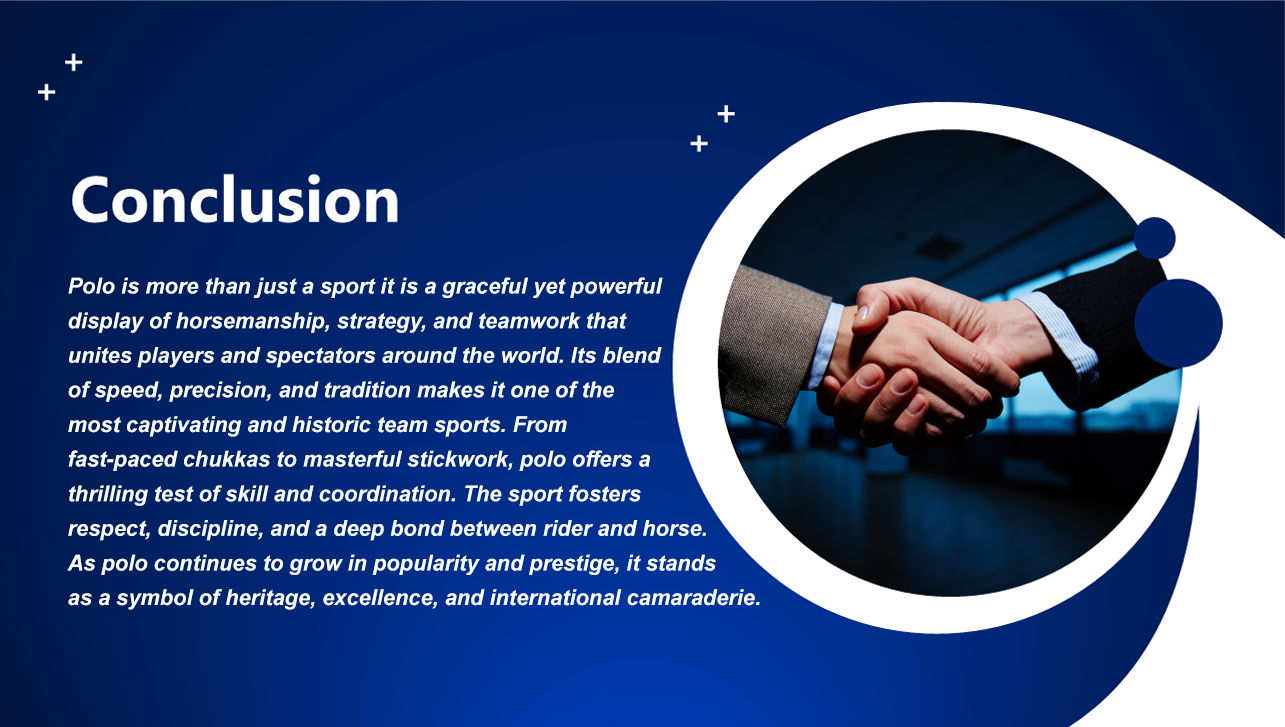
<style>
.page{position:relative;width:1285px;height:727px}
.page>*{position:absolute;margin:0}
.t1{font:21.8px/34.6px "Arial-BoldItalicMT";color:#fbffff}
</style>
<div class="page">
<p class="t1" style="left:67px;top:277px;width:693px;height:333px">Polo is more than just a sport it is a graceful yet powerful <br>display of horsemanship, strategy, and teamwork that<br>unites players and spectators around the world. Its blend <br>of speed, precision, and tradition makes it one of the <br>most captivating and historic team sports. From <br>fast-paced chukkas to masterful stickwork, polo offers a <br>thrilling test of skill and coordination. The sport fosters <br>respect, discipline, and a deep bond between rider and horse.<br>As polo continues to grow in popularity and prestige, it stands<br>as a symbol of heritage, excellence, and international camaraderie.</p>
</div>
